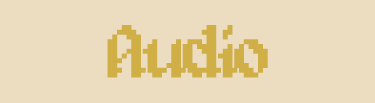
<style>
.page{position:relative;width:375px;height:103px;background:#ecddc0}
.page>*{position:absolute;margin:0}
.t1{font:76.2px "Alagard";letter-spacing:-0.1em;color:#cfaf46}
</style>
<div class="page">
<p class="t1" style="left:107px;top:25px;width:161px;height:53px">Audio</p>
</div>
